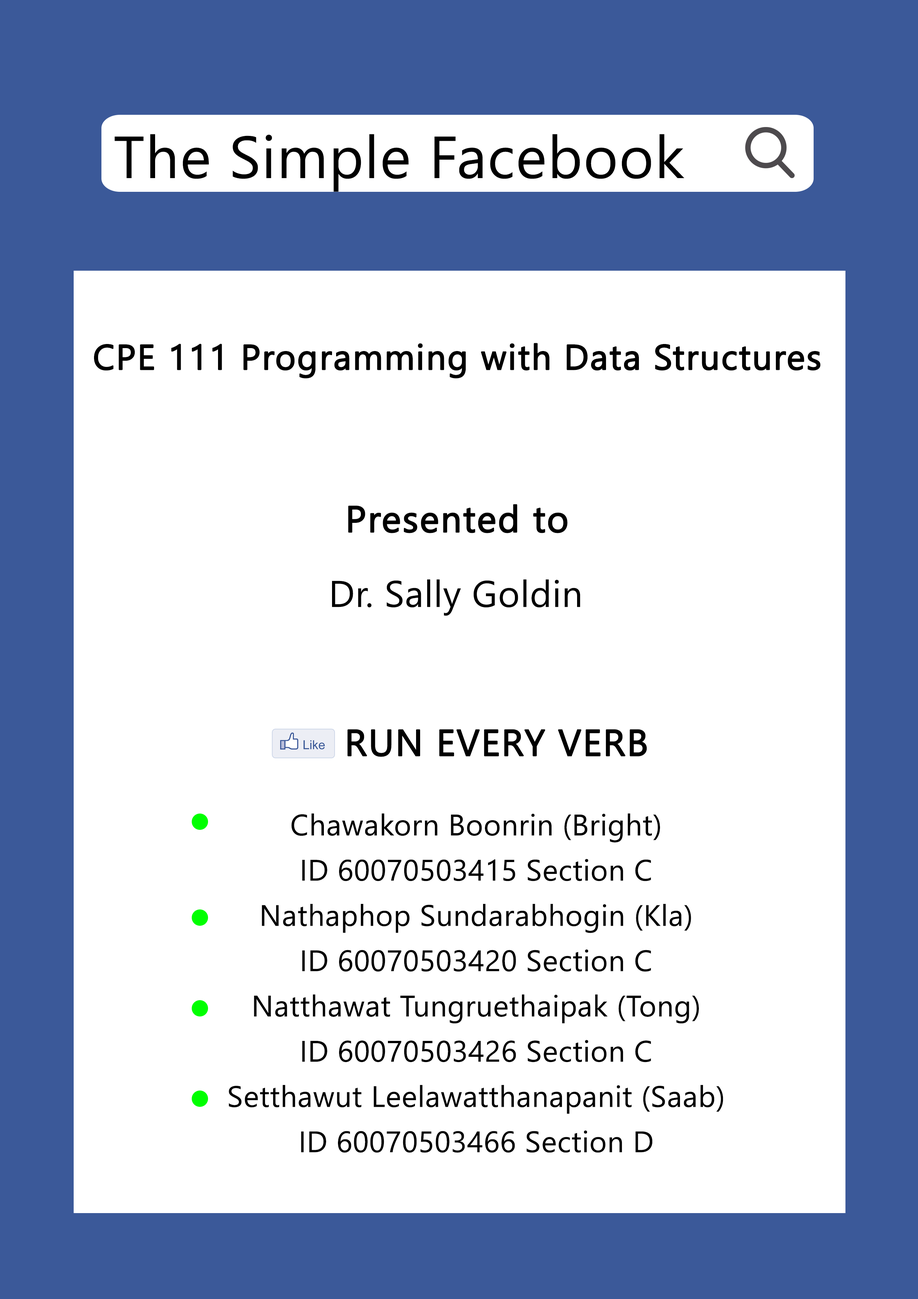
<style>
.page{position:relative;width:918px;height:1299px;background:#ffffff}
.page>*{position:absolute;margin:0}
.t1{font:59.2px "SegoeUIHistoric";letter-spacing:0.015em;color:#000000}
.t2{font:35.2px "SegoeUIHistoric";letter-spacing:0.015em;color:#000000;font-weight:bold}
.t3{font:37px "SegoeUIHistoric";letter-spacing:0.015em;color:#000000;font-weight:bold}
.t4{font:37px "SegoeUIHistoric";letter-spacing:0.015em;color:#000000}
.t5{font:29.6px/11.3px "SegoeUIHistoric";letter-spacing:0.015em;color:#000000}
</style>
<div class="page">
<p class="t1" style="left:114px;top:134px;width:571px;height:58px">The Simple Facebook</p>
<p class="t2" style="left:94px;top:343px;width:727px;height:35px">CPE 111 Programming with Data Structures</p>
<p class="t3" style="left:348px;top:504px;width:220px;height:29px">Presented to</p>
<p class="t4" style="left:332px;top:579px;width:249px;height:37px">Dr. Sally Goldin</p>
<p class="t3" style="left:347px;top:729px;width:300px;height:28px">RUN EVERY VERB</p>
<p class="t5" style="left:229px;top:813px;width:494px;height:339px;text-align:center">Chawakorn Boonrin (Bright)<br><br><br><br>ID 60070503415 Section C<br><br><br><br>Nathaphop Sundarabhogin (Kla)<br><br><br><br>ID 60070503420 Section C<br><br><br><br>Natthawat Tungruethaipak (Tong)<br><br><br><br>ID 60070503426 Section C<br><br><br><br>Setthawut Leelawatthanapanit (Saab)<br><br><br><br>ID 60070503466 Section D</p>
</div>
